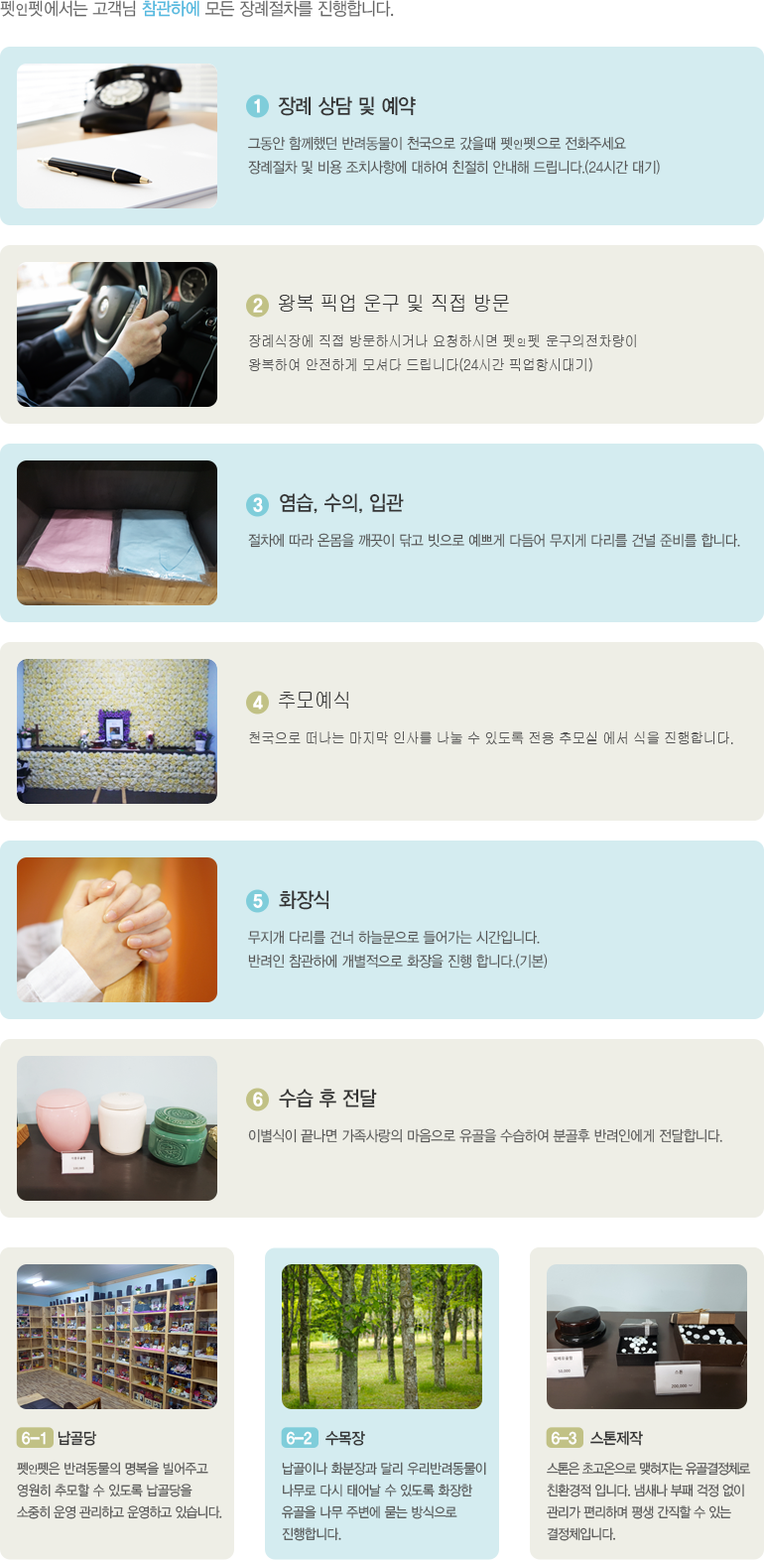
<style>
.page{position:relative;width:764px;height:1560px;background:#eeeee6}
.page>*{position:absolute;margin:0}
.t1{font:17.9px "YDVYGO32";letter-spacing:-0.025em;color:#666666;scale:0.91 1}
.t2{font:17.9px "YDVYGO32";letter-spacing:0.05em;color:#666666;scale:0.91 1}
.t3{font:13.9px "YDVYGO32";letter-spacing:0.05em;color:#666666;scale:0.91 1}
.t4{font:17.9px "YDVYGO33";letter-spacing:-0.025em;color:#56badf;scale:0.91 1}
.t5{font:17.9px "YDVYGO35";letter-spacing:-0.025em;color:#ffffff;font-weight:bold;scale:0.91 1}
.t6{font:20.8px "YDVYGO33";letter-spacing:-0.025em;color:#333333;scale:0.91 1}
.t7{font:14.9px/23.8px "YDVYGO32";letter-spacing:-0.025em;color:#555555;scale:0.91 1}
.t8{font:20.8px/23.8px "YDVYGO33";letter-spacing:-0.025em;color:#333333;scale:0.91 1}
.t9{font:14.9px/35.7px "YDVYGO32";letter-spacing:-0.025em;color:#555555;scale:0.91 1}
.t10{font:14.9px/35.7px "YDVYGO32";letter-spacing:0.05em;color:#555555;scale:0.91 1}
.t11{font:10.9px/35.7px "YDVYGO32";letter-spacing:0.05em;color:#555555;scale:0.91 1}
.t12{font:14.9px/23.8px "Gulim";letter-spacing:-0.025em;color:#555555;scale:0.91 1}
.t13{font:20.8px/23.8px "Gulim";letter-spacing:-0.025em;color:#333333;scale:0.91 1}
.t14{font:14.9px/35.7px "Gulim";letter-spacing:-0.025em;color:#555555;scale:0.91 1}
.t15{font:14.9px/35.7px "Gulim";letter-spacing:0.05em;color:#555555;scale:0.91 1}
.t16{font:10.9px/35.7px "Gulim";letter-spacing:0.05em;color:#555555;scale:0.91 1}
.t17{font:13.9px/21.8px "YDVYGO32";letter-spacing:-0.05em;color:#555555;scale:0.91 1}
.t18{font:15.9px/23.8px "YDVYGO35";color:#ffffff;scale:0.91 1}
.t19{font:15.9px/23.8px "YDVYGO33";letter-spacing:-0.025em;color:#333333;scale:0.91 1}
.t20{font:13.9px/29.8px "YDVYGO32";letter-spacing:-0.025em;color:#555555;scale:0.91 1}
.t21{font:10.9px/29.8px "YDVYGO32";letter-spacing:-0.025em;color:#555555;scale:0.91 1}
.t22{font:13.9px/21.8px "YDVYGO32";letter-spacing:-0.025em;color:#555555;scale:0.91 1}
.t23{font:15.9px/23.8px "YDVYGO35";letter-spacing:-0.025em;color:#ffffff;scale:0.91 1}
.t24{font:13.9px/29.8px "YDVYGO32";letter-spacing:-0.075em;color:#555555;scale:0.91 1}
</style>
<div class="page">
<p class="t1" style="left:0px;top:0px;width:394px;height:17px"><span class="t2">펫</span><span class="t3">인</span><span class="t2">펫</span>에서는 고객님 <span class="t4">참관하에</span> 모든 장례절차를 진행합니다.</p>
<p class="t5" style="left:254px;top:98px;width:6px;height:15px">1</p>
<p class="t6" style="left:278px;top:96px;width:138px;height:20px">장례 상담 및 예약</p>
<p class="t7" style="left:248px;top:136px;width:412px;height:39px"><span class="t8"><br></span><span class="t9">그동안 함께했던 반려동물이 천국으로 갔을때 </span><span class="t10">펫</span><span class="t11">인</span><span class="t10">펫</span><span class="t9">으로 전화주세요<br></span>장례절차 및 비용 조치사항에 대하여 친절히 안내해 드립니다.(24시간 대기)</p>
<p class="t12" style="left:249px;top:295px;width:387px;height:77px"><span class="t13">     왕복 픽업 운구 및 직접 방문<br></span><span class="t14">장례식장에 직접 방문하시거나 요청하시면 </span><span class="t15">펫</span><span class="t16">인</span><span class="t15">펫</span><span class="t14"> 운구의전차량이<br></span>왕복하여 안전하게 모셔다 드립니다(24시간 픽업항시대기)</p>
<p class="t5" style="left:253px;top:298px;width:10px;height:15px">2</p>
<p class="t9" style="left:248px;top:493px;width:492px;height:55px"><span class="t8">     염습, 수의, 입관<br></span>절차에 따라 온몸을 깨끗이 닦고 빗으로 예쁘게 다듬어 무지게 다리를 건널 <span class="t7">준비를 합니다.</span></p>
<p class="t5" style="left:253px;top:497px;width:10px;height:15px">3</p>
<p class="t14" style="left:249px;top:692px;width:484px;height:52px"><span class="t13">     추모예식<br></span>천국으로 떠나는 마지막 인사를 나눌 수 있도록 전용 추모실 에서 식을 진행합니다.</p>
<p class="t5" style="left:253px;top:695px;width:10px;height:15px">4</p>
<p class="t7" style="left:248px;top:890px;width:300px;height:79px"><span class="t8">     화장식<br></span><span class="t9">무지개 다리를 건너 하늘문으로 들어가는 시간입니다.<br></span>반려인 참관하에 개별적으로 화장을 진행 합니다.(기본)</p>
<p class="t5" style="left:253px;top:894px;width:10px;height:14px">5</p>
<p class="t9" style="left:248px;top:1089px;width:475px;height:54px"><span class="t8">     수습 후 전달<br></span>이별식이 끝나면 가족사랑의 마음으로 유골을 수습하여 분골후 반려인에게 전달합니다.</p>
<p class="t5" style="left:253px;top:1092px;width:10px;height:15px">6</p>
<p class="t17" style="left:17px;top:1431px;width:205px;height:89px"><span class="t18"> 6-1  </span><span class="t19">납골당<br></span><span class="t20">펫</span><span class="t21">인</span><span class="t20">펫은 반려동물의 명복을 빌어주고 <br></span><span class="t22">영원히 추모할 수 있도록 납골당을 <br></span>소중히 운영 관리하고 운영하고 있습니다.</p>
<p class="t22" style="left:282px;top:1431px;width:204px;height:110px"><span class="t23"> 6-2 </span><span class="t19">  수목장<br></span><span class="t20">납골이나 화분장과 달리 우리반려동물이 <br></span>나무로 다시 태어날 수 있도록 화장한<br>유골을 나무 주변에 묻는 방식으로 <br>진행합니다.</p>
<p class="t17" style="left:547px;top:1431px;width:204px;height:110px"><span class="t23"> 6-3</span><span class="t19">   스톤제작<br></span><span class="t24">스톤은 초고온으로 맺혀지는 유골결정체로<br></span>친환경적 입니다. 냄새나 부패 걱정 없이 <br>관리가 편리하며 평생 간직할 수 있는 <br>결정체입니다.</p>
</div>
